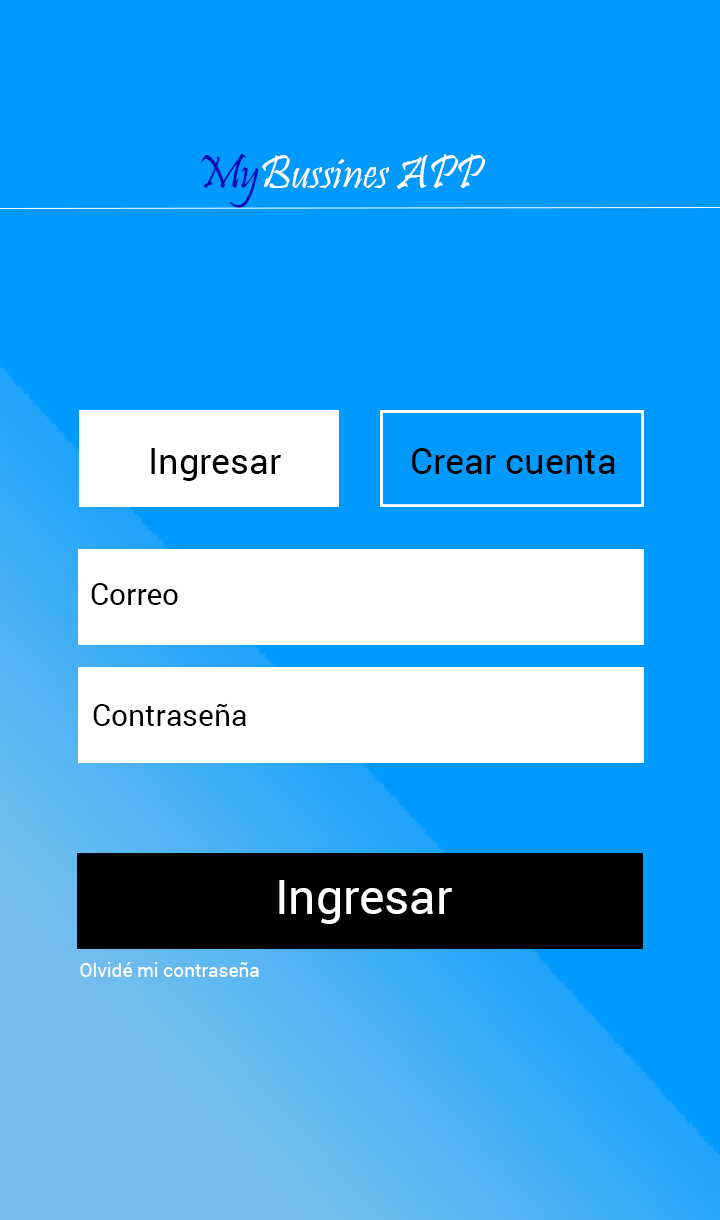
<style>
.page{position:relative;width:720px;height:1220px;background:#009aff}
.page>*{position:absolute;margin:0}
.t1{font:48px "Pristina-Regular";color:#ffffff}
.t2{font:48px "Pristina-Regular";color:#0c0cba}
.t3{font:36px "Roboto-Regular";color:#000000}
.t4{font:30px "Roboto-Regular";color:#010000}
.t5{font:48px "Roboto-Regular";color:#ffffff}
.t6{font:19px "Roboto-Regular";color:#ffffff}
</style>
<div class="page">
<p class="t1" style="left:200px;top:154px;width:286px;height:54px"><span class="t2">My</span>Bussines APP</p>
<p class="t3" style="left:151px;top:448px;width:130px;height:33px">Ingresar</p>
<p class="t3" style="left:412px;top:448px;width:203px;height:26px">Crear cuenta</p>
<p class="t4" style="left:91px;top:583px;width:87px;height:22px">Correo</p>
<p class="t4" style="left:93px;top:703px;width:153px;height:23px">Contraseña</p>
<p class="t5" style="left:279px;top:880px;width:173px;height:44px">Ingresar</p>
<p class="t6" style="left:80px;top:962px;width:179px;height:15px">Olvidé mi contraseña</p>
</div>
